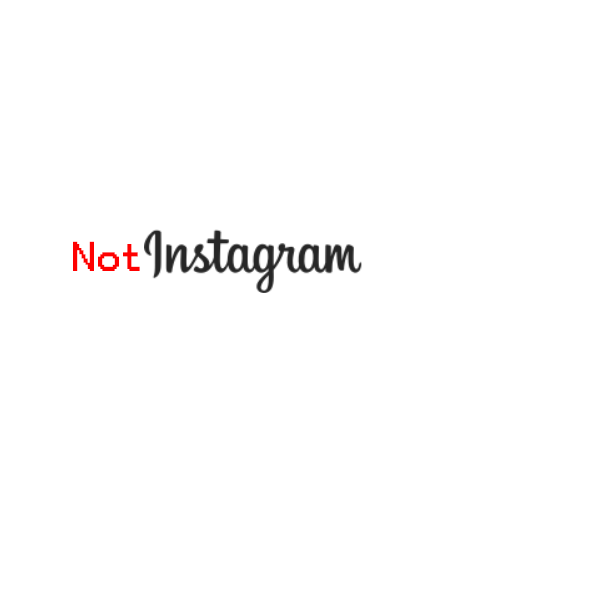
<style>
.page{position:relative;width:600px;height:600px;background:#ffffff}
.page>*{position:absolute;margin:0}
.t1{font:33.3px "FONTSPRINGDEMO-BlueVinylBold"}
.t2{font:33.3px "Terminal"}
</style>
<div class="page">
<p class="t1" style="left:73px;top:241px;width:209px;height:39px"><span class="t2">Not</span>Instagram</p>
</div>
